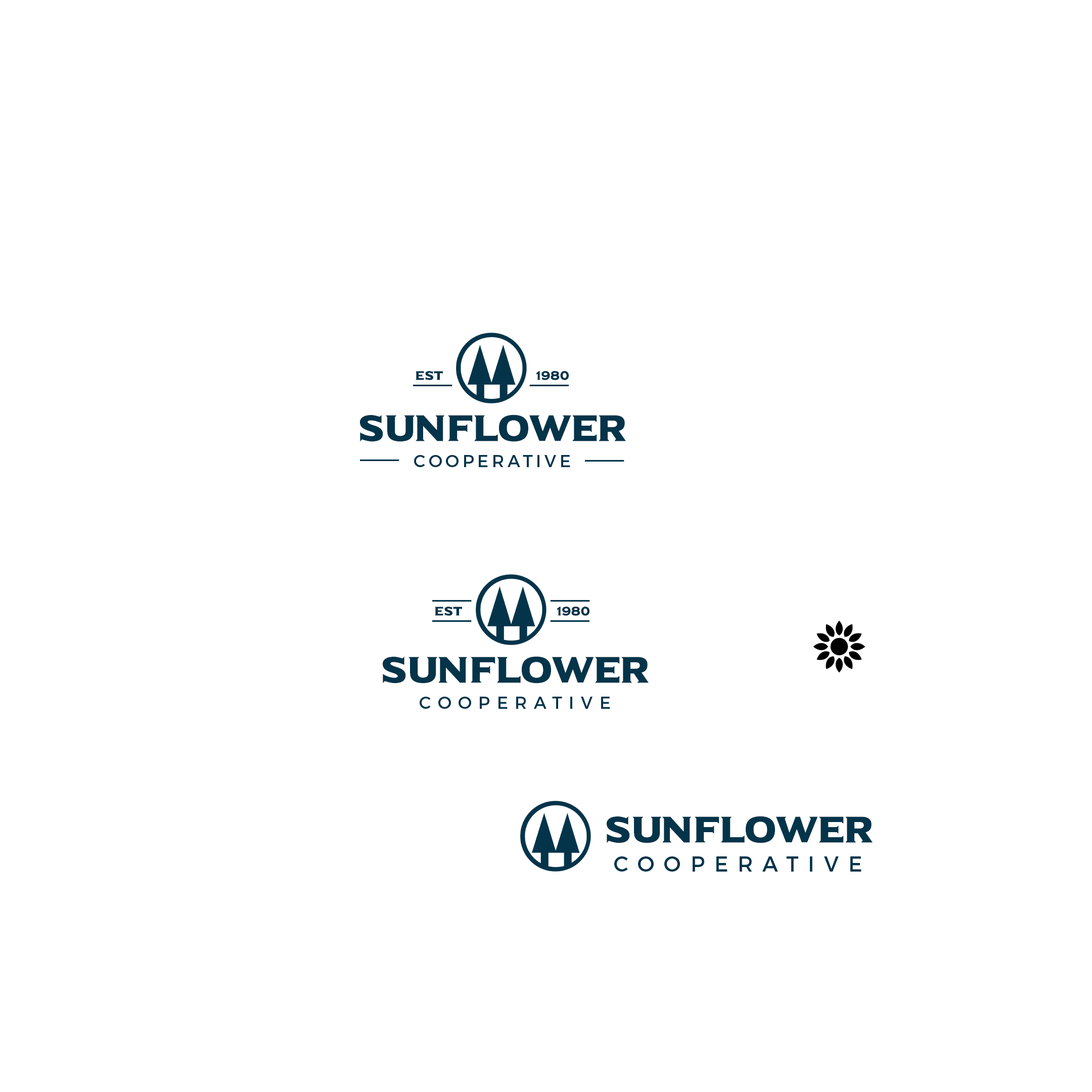
<style>
.page{position:relative;width:1092px;height:1092px;background:#ffffff}
.page>*{position:absolute;margin:0}
.t1{font:12.4px "UniversalSerif";letter-spacing:0.05em;color:#04344a}
.t2{font:36.3px "UniversalSerif";color:#04344a}
.t3{font:17px "Montserrat-Regular";letter-spacing:0.2em;color:#04344a}
.t4{font:17px "Montserrat-Regular";letter-spacing:0.4em;color:#04344a}
.t5{font:21.1px "Montserrat-Regular";letter-spacing:0.45em;color:#04344a}
</style>
<div class="page">
<p class="t1" style="left:416px;top:371px;width:27px;height:9px">EST</p>
<p class="t1" style="left:536px;top:371px;width:33px;height:9px">1980</p>
<p class="t2" style="left:360px;top:415px;width:266px;height:27px">SUNFLOWER</p>
<p class="t3" style="left:414px;top:455px;width:156px;height:12px">COOPERATIVE</p>
<p class="t1" style="left:435px;top:607px;width:27px;height:9px">EST</p>
<p class="t1" style="left:557px;top:607px;width:32px;height:9px">1980</p>
<p class="t2" style="left:383px;top:656px;width:266px;height:28px">SUNFLOWER</p>
<p class="t4" style="left:420px;top:697px;width:190px;height:12px">COOPERATIVE</p>
<p class="t2" style="left:607px;top:816px;width:266px;height:27px">SUNFLOWER</p>
<p class="t5" style="left:614px;top:856px;width:247px;height:16px">COOPERATIVE</p>
</div>
